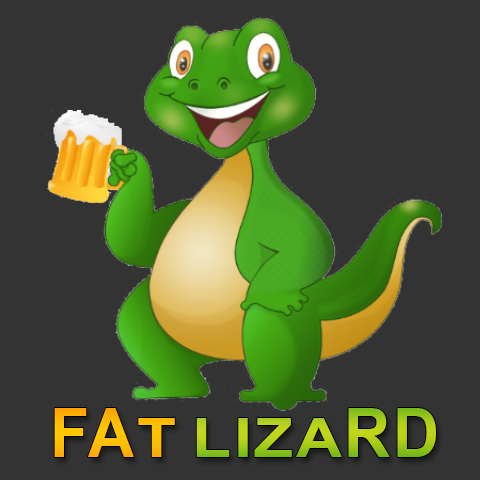
<style>
.page{position:relative;width:480px;height:480px;background:#333333}
.page>*{position:absolute;margin:0}
.t1{font:67.7px "Arial-BoldMT";letter-spacing:0.04em;color:#ffbc04;scale:0.94 1}
.t2{font:54.2px "Arial-BoldMT";letter-spacing:0.04em;color:#ffbc04;scale:1.18 1}
.t3{font:54.2px "Arial-BoldMT";letter-spacing:0.04em;scale:1.18 1}
.t4{font:67.7px "Arial-BoldMT";letter-spacing:0.04em;scale:0.94 1}
</style>
<div class="page">
<p class="t1" style="left:54px;top:408px;width:121px;height:49px">FA<span class="t2">T</span></p>
<p class="t3" style="left:196px;top:408px;width:240px;height:49px"><span class="t4">       </span>LIZA<span class="t4">RD</span></p>
</div>
